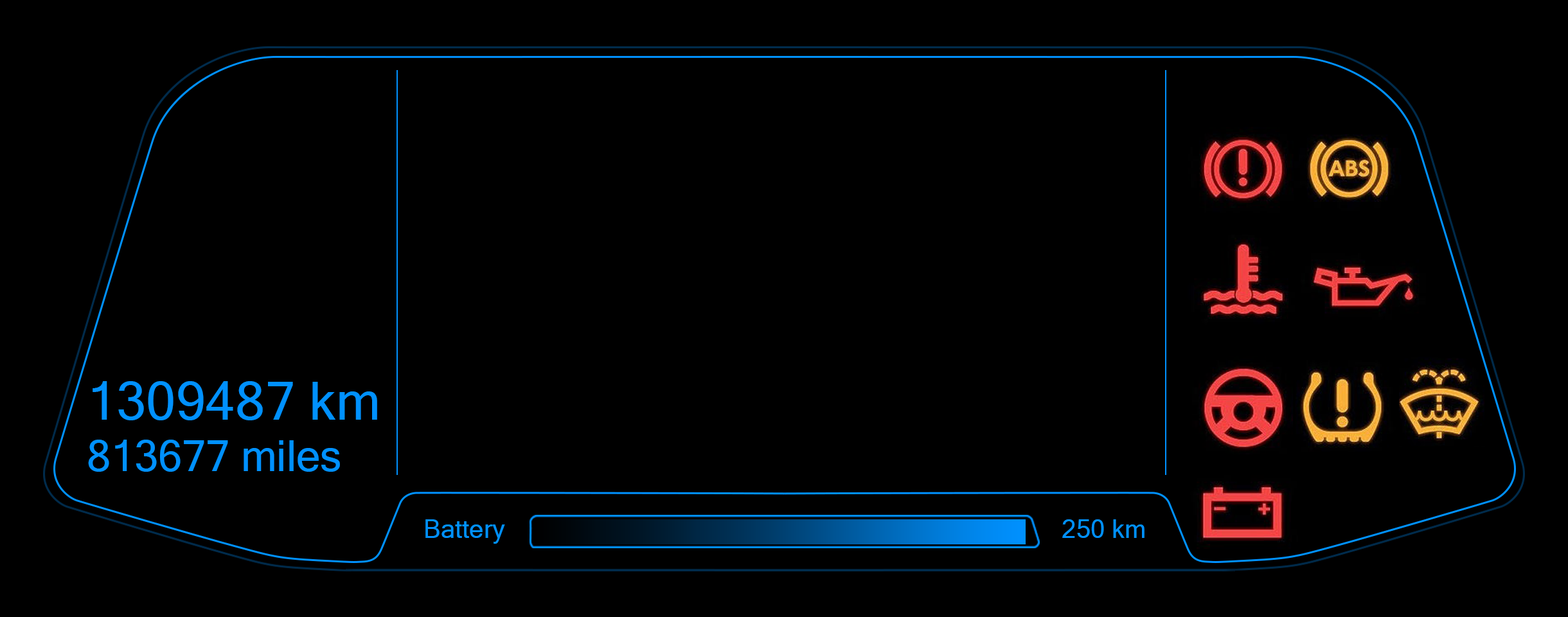
<style>
.page{position:relative;width:1568px;height:617px;background:#000000}
.page>*{position:absolute;margin:0}
.t1{font:42.8px "MicrosoftSansSerif";color:#0091ff}
.t2{font:53.6px "MicrosoftSansSerif";color:#0091ff}
.t3{font:25.7px "MicrosoftSansSerif";color:#0091ff}
</style>
<div class="page">
<p class="t1" style="left:88px;top:381px;width:289px;height:91px"><span class="t2">  1309487 km<br> </span>  813677 miles</p>
<p class="t3" style="left:425px;top:519px;width:720px;height:25px">Battery                          250 km</p>
</div>
